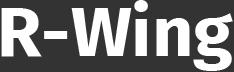
<style>
.page{position:relative;width:234px;height:72px;background:#333333}
.page>*{position:absolute;margin:0}
.t1{font:68.4px "FiraSans-Bold";color:#ffffff;scale:1.05 1}
</style>
<div class="page">
<p class="t1" style="left:1px;top:0px;width:232px;height:71px">R-Wing</p>
</div>
